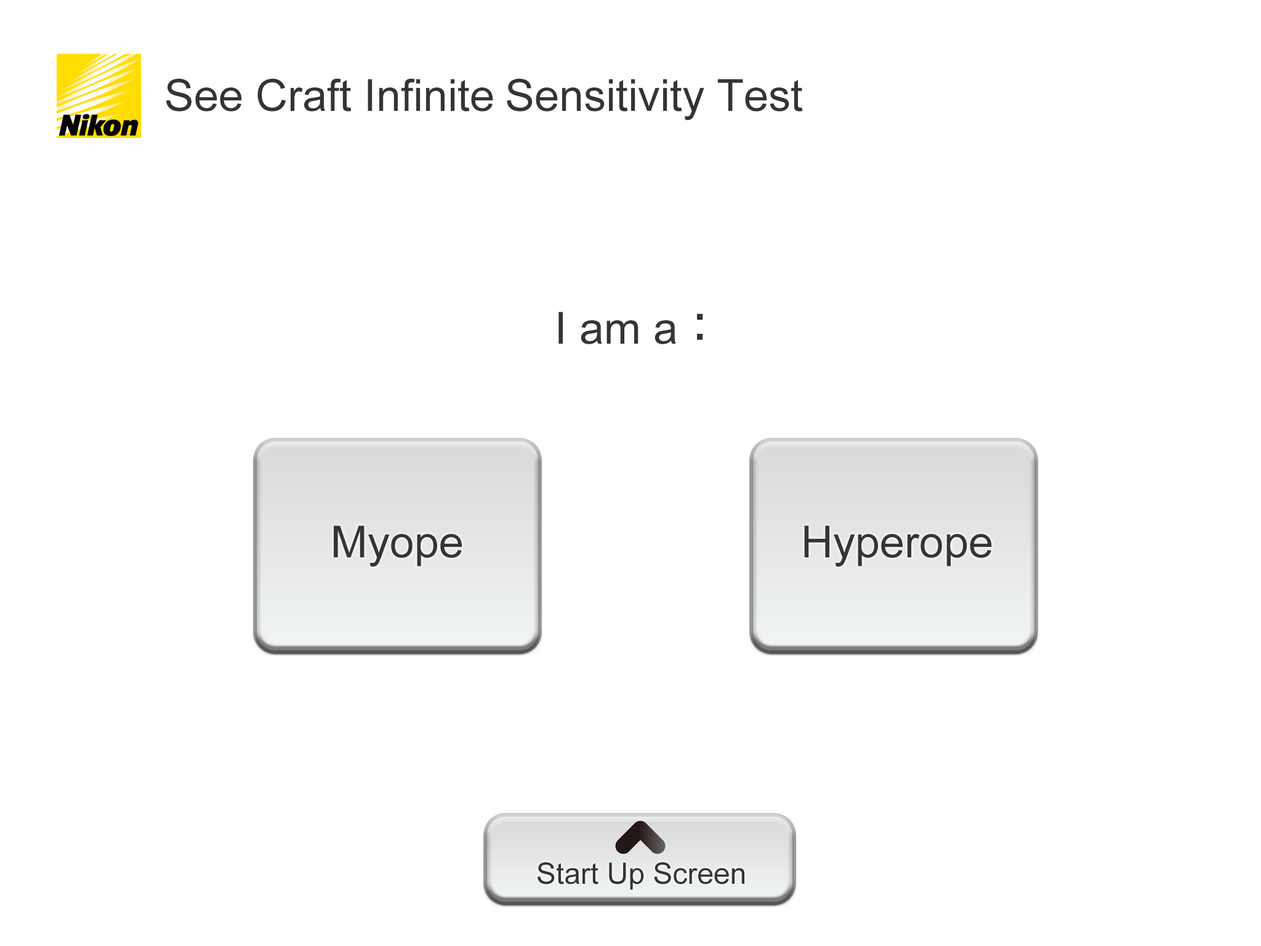
<style>
.page{position:relative;width:1261px;height:946px;background:#ffffff}
.page>*{position:absolute;margin:0}
.t1{font:44.3px "ArialMT";color:#343434}
.t2{font:44.3px "ShinGoPro-Medium";color:#343434}
.t3{font:29.6px "ArialMT";color:#343434}
</style>
<div class="page">
<p class="t1" style="left:166px;top:78px;width:637px;height:42px">See Craft Infinite Sensitivity Test</p>
<p class="t1" style="left:558px;top:312px;width:145px;height:32px">I am a<span class="t2">：</span></p>
<p class="t1" style="left:334px;top:525px;width:128px;height:41px">Myope</p>
<p class="t1" style="left:804px;top:525px;width:188px;height:41px">Hyperope</p>
<p class="t3" style="left:537px;top:862px;width:207px;height:28px">Start Up Screen</p>
</div>
